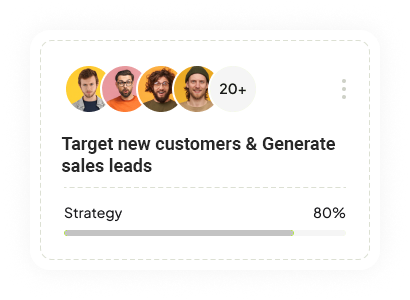
<style>
.page{position:relative;width:410px;height:300px;background:#ffffff}
.page>*{position:absolute;margin:0}
.t1{font:18px "Roboto-Bold";color:#282828}
</style>
<div class="page">
<p class="t1" style="left:61px;top:137px;width:274px;height:35px">Target new customers &amp; Generate <br>sales leads</p>
</div>
